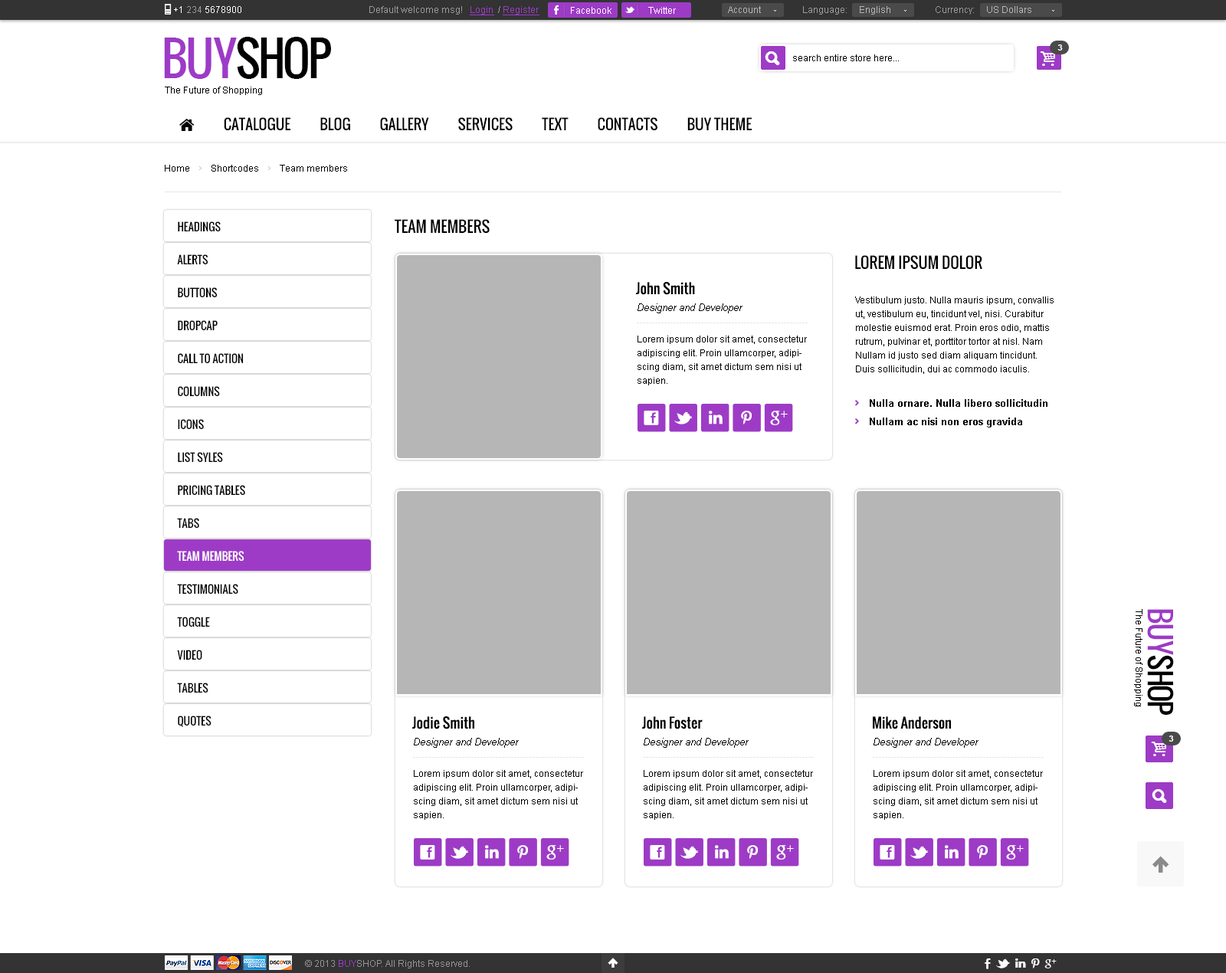
<style>
.page{position:relative;width:1226px;height:973px;background:#ffffff}
.page>*{position:absolute;margin:0}
.t1{font:9.2px "ArialMT";color:#ffffff}
.t2{font:9.2px "ArialMT";color:#9b9b9b}
.t3{font:9.2px "ArialMT";color:#9d3bc6;text-decoration:underline}
.t4{font:9.2px "ArialMT";color:#b6b6b6}
.t5{font:46px "Oswald";letter-spacing:-0.06em;color:#000000;text-transform:uppercase}
.t6{font:46px "Oswald";letter-spacing:-0.06em;color:#9d3bc6;text-transform:uppercase}
.t7{font:8.4px "Arial-BoldMT";color:#ffffff;text-transform:uppercase}
.t8{font:9.2px "ArialMT";color:#000000}
.t9{font:10.7px/32.9px "Oswald";color:#000000;text-transform:uppercase}
.t10{font:10.7px/32.9px "Oswald";color:#ffffff;text-transform:uppercase}
.t11{font:15.3px "Oswald";color:#000000;text-transform:uppercase}
.t12{font:13.8px "Oswald";color:#000000}
.t13{font:10px "Arial-ItalicMT";color:#010101}
.t14{font:9.2px/13.8px "ArialMT";color:#000000}
.t15{font:10px "Arial-BoldMT";color:#e6e6e6}
.t16{font:10px/18.4px "Arial-BoldMT";color:#000000}
.t17{font:14.1px "andepict";letter-spacing:0.94em;color:#ffffff}
.t18{font:29.1px "Oswald";letter-spacing:-0.06em;color:#000000;text-transform:uppercase}
.t19{font:29.1px "Oswald";letter-spacing:-0.06em;color:#9d3bc6;text-transform:uppercase}
.t20{font:9.2px "ArialMT";color:#959595}
.t21{font:9.2px "ArialMT";color:#9d3bc6}
</style>
<div class="page">
<p class="t1" style="left:174px;top:6px;width:67px;height:7px">+1 <span class="t2">234 </span>5678900</p>
<p class="t2" style="left:369px;top:6px;width:170px;height:9px">Default welcome msg!   <span class="t3">Login </span> / <span class="t3">Register</span></p>
<p class="t2" style="left:369px;top:6px;width:170px;height:9px">Default welcome msg!   <span class="t3">Login </span> / <span class="t3">Register</span></p>
<p class="t1" style="left:571px;top:7px;width:40px;height:7px">Facebook</p>
<p class="t1" style="left:648px;top:7px;width:28px;height:7px">Twitter</p>
<p class="t4" style="left:728px;top:6px;width:33px;height:7px">Account</p>
<p class="t2" style="left:803px;top:6px;width:87px;height:9px">Language:     <span class="t4">English</span></p>
<p class="t4" style="left:935px;top:6px;width:96px;height:9px"><span class="t2">Currency:     </span>US Dollars</p>
<p class="t5" style="left:164px;top:37px;width:167px;height:42px"><span class="t6">buy</span>shop</p>
<p class="t7" style="left:1057px;top:44px;width:6px;height:7px">3</p>
<p class="t8" style="left:793px;top:54px;width:106px;height:7px">search entire store here...</p>
<p class="t8" style="left:165px;top:87px;width:97px;height:8px">The Future of Shopping</p>
<p class="t8" style="left:165px;top:165px;width:182px;height:7px">Home         Shortcodes         Team members</p>
<p class="t9" style="left:177px;top:221px;width:68px;height:506px">Headings<br>Alerts<br>Buttons<br>Dropcap<br>Call To Action<br>Columns<br>Icons<br>List syles<br>Pricing Tables<br>Tabs<br><span class="t10">Team Members<br></span>Testimonials<br>Toggle<br>Video<br>Tables<br>Quotes</p>
<p class="t11" style="left:395px;top:219px;width:95px;height:15px">Team members</p>
<p class="t11" style="left:855px;top:255px;width:127px;height:15px">Lorem ipsum dolor</p>
<p class="t12" style="left:636px;top:282px;width:59px;height:13px">John Smith</p>
<p class="t13" style="left:637px;top:303px;width:105px;height:10px">Designer and Developer</p>
<p class="t14" style="left:855px;top:296px;width:198px;height:78px">Vestibulum justo. Nulla mauris ipsum, convallis ut, vestibulum eu, tincidunt vel, nisi. Curabitur molestie euismod erat. Proin eros odio, mattis rutrum, pulvinar et, porttitor tortor at nisl. Nam Nullam id justo sed diam aliquam tincidunt. Duis sollicitudin, dui ac commodo iaculis.</p>
<p class="t15" style="left:637px;top:323px;width:170px;height:0px">--------------------------------------------------------</p>
<p class="t14" style="left:637px;top:336px;width:170px;height:49px">Lorem ipsum dolor sit amet, consectetur adipiscing elit. Proin ullamcorper, adipiscing diam, sit amet dictum sem nisi ut sapien.</p>
<p class="t16" style="left:869px;top:399px;width:178px;height:28px">Nulla ornare. Nulla libero sollicitudin <br>Nullam ac nisi non eros gravida</p>
<p class="t17" style="left:770px;top:411px;width:17px;height:14px">+</p>
<p class="t8" style="left:1134px;top:609px;width:8px;height:97px;rotate:90deg">The Future of Shopping</p>
<p class="t18" style="left:1147px;top:609px;width:27px;height:106px;rotate:90deg"><span class="t19">buy</span>shop</p>
<p class="t12" style="left:412px;top:716px;width:62px;height:13px">Jodie Smith</p>
<p class="t12" style="left:642px;top:716px;width:60px;height:13px">John Foster</p>
<p class="t12" style="left:873px;top:716px;width:78px;height:13px">Mike Anderson</p>
<p class="t13" style="left:414px;top:738px;width:105px;height:10px">Designer and Developer</p>
<p class="t13" style="left:643px;top:738px;width:105px;height:10px">Designer and Developer</p>
<p class="t13" style="left:873px;top:738px;width:105px;height:10px">Designer and Developer</p>
<p class="t7" style="left:1168px;top:735px;width:6px;height:7px">3</p>
<p class="t15" style="left:413px;top:757px;width:171px;height:1px">--------------------------------------------------------</p>
<p class="t15" style="left:643px;top:757px;width:171px;height:1px">--------------------------------------------------------</p>
<p class="t15" style="left:873px;top:757px;width:170px;height:1px">--------------------------------------------------------</p>
<p class="t14" style="left:414px;top:770px;width:169px;height:50px">Lorem ipsum dolor sit amet, consectetur adipiscing elit. Proin ullamcorper, adipiscing diam, sit amet dictum sem nisi ut sapien.</p>
<p class="t14" style="left:643px;top:770px;width:170px;height:50px">Lorem ipsum dolor sit amet, consectetur adipiscing elit. Proin ullamcorper, adipiscing diam, sit amet dictum sem nisi ut sapien.</p>
<p class="t14" style="left:873px;top:770px;width:170px;height:50px">Lorem ipsum dolor sit amet, consectetur adipiscing elit. Proin ullamcorper, adipiscing diam, sit amet dictum sem nisi ut sapien.</p>
<p class="t17" style="left:546px;top:845px;width:18px;height:15px">+</p>
<p class="t17" style="left:776px;top:845px;width:18px;height:15px">+</p>
<p class="t17" style="left:1006px;top:845px;width:17px;height:15px">+</p>
<p class="t20" style="left:305px;top:960px;width:165px;height:8px">© 2013 <span class="t21">BUY</span>SHOP. All Rights Reserved.</p>
</div>
